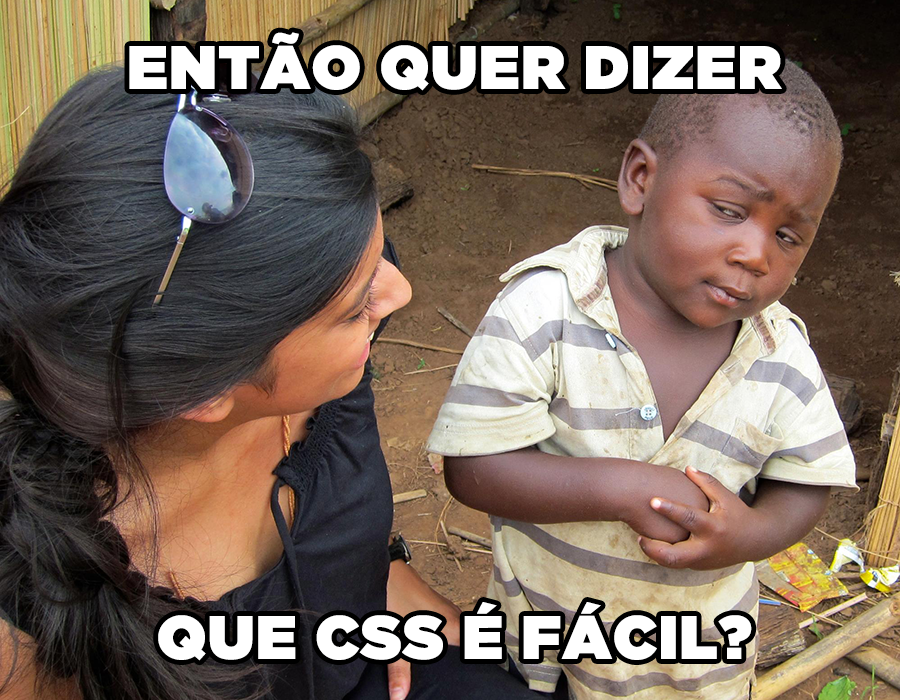
<style>
.page{position:relative;width:900px;height:700px}
.page>*{position:absolute;margin:0}
.t1{font:61px "GothamUltra";color:#ffffff;font-weight:bold}
</style>
<div class="page">
<p class="t1" style="left:129px;top:32px;width:653px;height:59px">ENTÃO QUER DIZER</p>
<p class="t1" style="left:158px;top:602px;width:594px;height:59px">QUE CSS É FÁCIL?</p>
</div>
